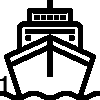
<style>
.page{position:relative;width:100px;height:100px;background:#ffffff}
.page>*{position:absolute;margin:0}
.t1{font:22.5px "Helvetica-Bold";color:#000000}
</style>
<div class="page">
<p class="t1" style="left:0px;top:76px;width:7px;height:16px">1</p>
</div>
